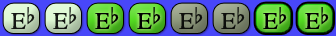
<style>
.page{position:relative;width:336px;height:36px}
.page>*{position:absolute;margin:0}
.t1{font:24px "OpusChords";color:#000000}
</style>
<div class="page">
<p class="t1" style="left:11px;top:7px;width:24px;height:22px;opacity:0.9">Eb</p>
<p class="t1" style="left:53px;top:7px;width:24px;height:22px;opacity:0.9">Eb</p>
<p class="t1" style="left:95px;top:7px;width:24px;height:22px">Eb</p>
<p class="t1" style="left:137px;top:7px;width:24px;height:22px">Eb</p>
<p class="t1" style="left:179px;top:7px;width:24px;height:22px;opacity:0.9">Eb</p>
<p class="t1" style="left:221px;top:7px;width:24px;height:22px;opacity:0.9">Eb</p>
<p class="t1" style="left:263px;top:7px;width:24px;height:22px">Eb</p>
<p class="t1" style="left:305px;top:7px;width:24px;height:22px">Eb</p>
</div>
